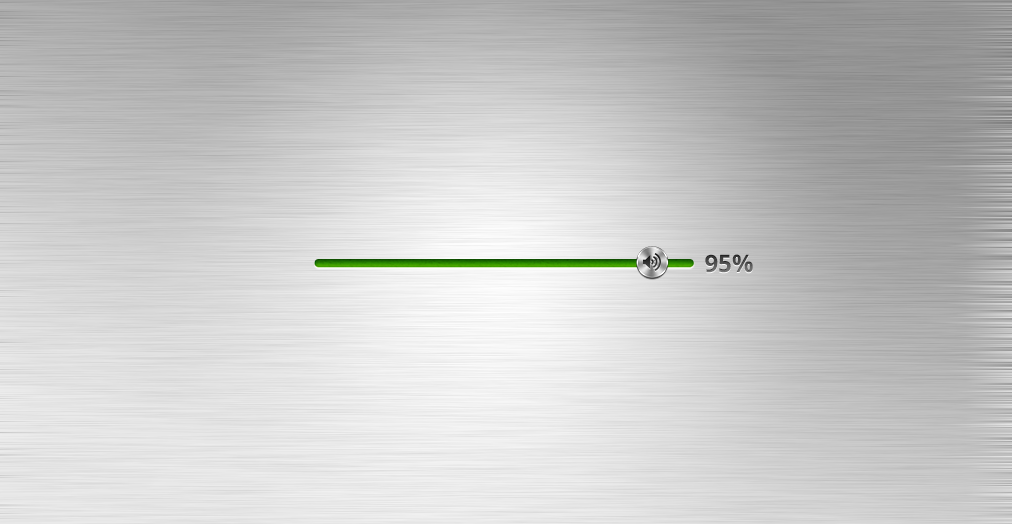
<style>
.page{position:relative;width:1012px;height:524px}
.page>*{position:absolute;margin:0}
.t1{font:24px "OpenSans-Bold";color:#4e4e4e;text-transform:uppercase}
</style>
<div class="page">
<p class="t1" style="left:705px;top:254px;width:48px;height:19px">95%</p>
</div>
